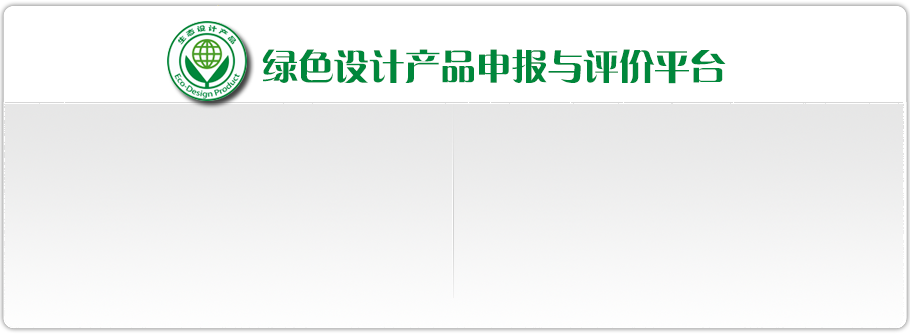
<style>
.page{position:relative;width:910px;height:334px;background:#ffffff}
.page>*{position:absolute;margin:0}
.t1{font:36px "FZCQJW--GB1-0";letter-spacing:-0.01em;color:#00873b}
</style>
<div class="page">
<p class="t1" style="left:262px;top:49px;width:464px;height:35px">绿色设计产品申报与评价平台</p>
</div>
